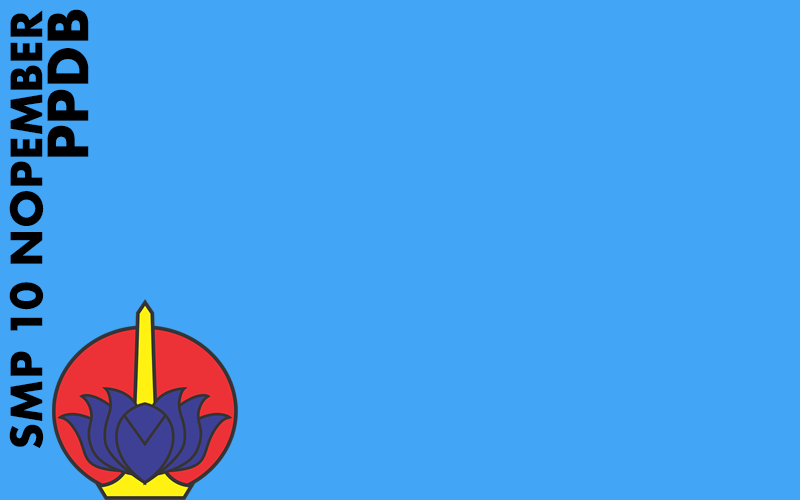
<style>
.page{position:relative;width:800px;height:500px;background:#42a5f5}
.page>*{position:absolute;margin:0}
.t1{font:42.1px "Futura-Bold";color:#000000}
.t2{font:54px "Futura-Bold";color:#000000}
</style>
<div class="page">
<p class="t1" style="left:9px;top:10px;width:35px;height:438px;rotate:-90deg">SMP 10 NOPEMBER</p>
<p class="t2" style="left:47px;top:9px;width:42px;height:148px;rotate:-90deg">PPDB</p>
</div>
